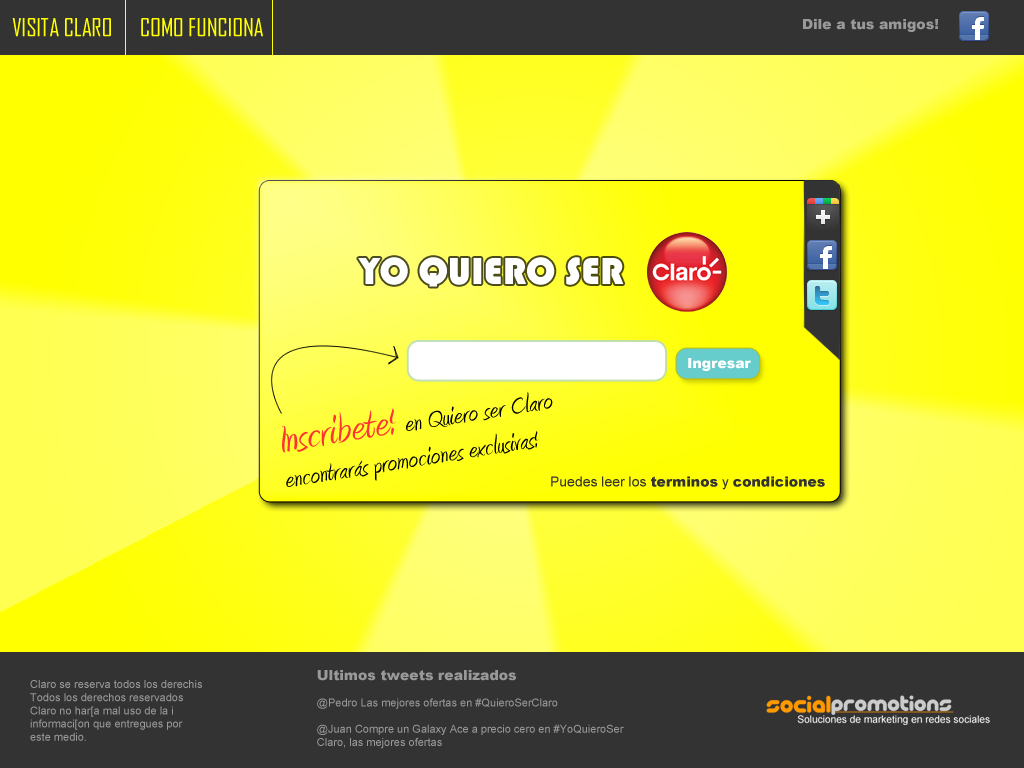
<style>
.page{position:relative;width:1024px;height:768px;background:#333333}
.page>*{position:absolute;margin:0}
.t1{font:24px "AgencyFB-Reg";color:#ffff00}
.t2{font:14px "Arial-Black";color:#999999}
.t3{font:39px "Bauhaus93";color:#ffffff}
.t4{font:14px "Arial-Black";color:#ffffff}
.t5{font:30px "Amienne";color:#000000}
.t6{font:48px "Amienne";color:#ff3333}
.t7{font:14px "ArialMT";color:#333333}
.t8{font:14px "Arial-Black";color:#333333}
.t9{font:11px "ArialMT";color:#999999}
</style>
<div class="page">
<p class="t1" style="left:12px;top:18px;width:99px;height:19px">VISITA CLARO</p>
<p class="t1" style="left:141px;top:18px;width:122px;height:19px">COMO FUNCIONA</p>
<p class="t2" style="left:803px;top:19px;width:135px;height:13px">Dile a tus amigos!</p>
<p class="t3" style="left:358px;top:257px;width:266px;height:30px">YO QUIERO SER</p>
<p class="t4" style="left:688px;top:358px;width:63px;height:13px">Ingresar</p>
<p class="t5" style="left:281px;top:391px;width:272px;height:96px;rotate:-9deg"><span class="t6">Inscribete! </span>en Quiero ser Claro<br>encontrarás promociones exclusivas!</p>
<p class="t7" style="left:551px;top:476px;width:274px;height:14px">Puedes leer los <span class="t8">terminos</span> y <span class="t8">condiciones</span></p>
<p class="t9" style="left:317px;top:670px;width:307px;height:79px"><span class="t2">Ultimos tweets realizados<br></span><br>@Pedro Las mejores ofertas en #QuieroSerClaro<br><br>@Juan Compre un Galaxy Ace a precio cero en #YoQuieroSer<br>Claro, las mejores ofertas</p>
<p class="t9" style="left:30px;top:680px;width:172px;height:61px">Claro se reserva todos los derechis<br>Todos los derechos reservados<br>Claro no har[a mal uso de la i<br>informaci[on que entregues por<br>este medio.</p>
</div>
